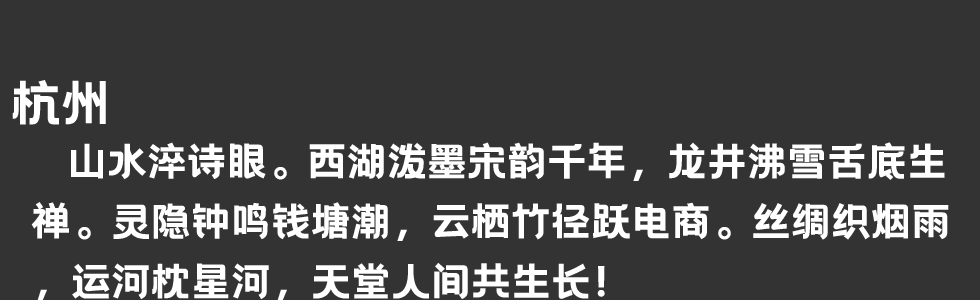
<style>
.page{position:relative;width:980px;height:300px;background:#333333}
.page>*{position:absolute;margin:0}
.t1{font:50px "HelloFont-WenYiHei";color:#ffffff}
.t2{font:40px/60px "HelloFont-WenYiHei";color:#ffffff}
</style>
<div class="page">
<p class="t1" style="left:12px;top:80px;width:94px;height:45px">杭州</p>
<p class="t2" style="left:31px;top:142px;width:918px;height:159px">山水淬诗眼。西湖泼墨宋韵千年，龙井沸雪舌底生<br>禅。灵隐钟鸣钱塘潮，云栖竹径跃电商。丝绸织烟雨<br>，运河枕星河，天堂人间共生长！</p>
</div>
